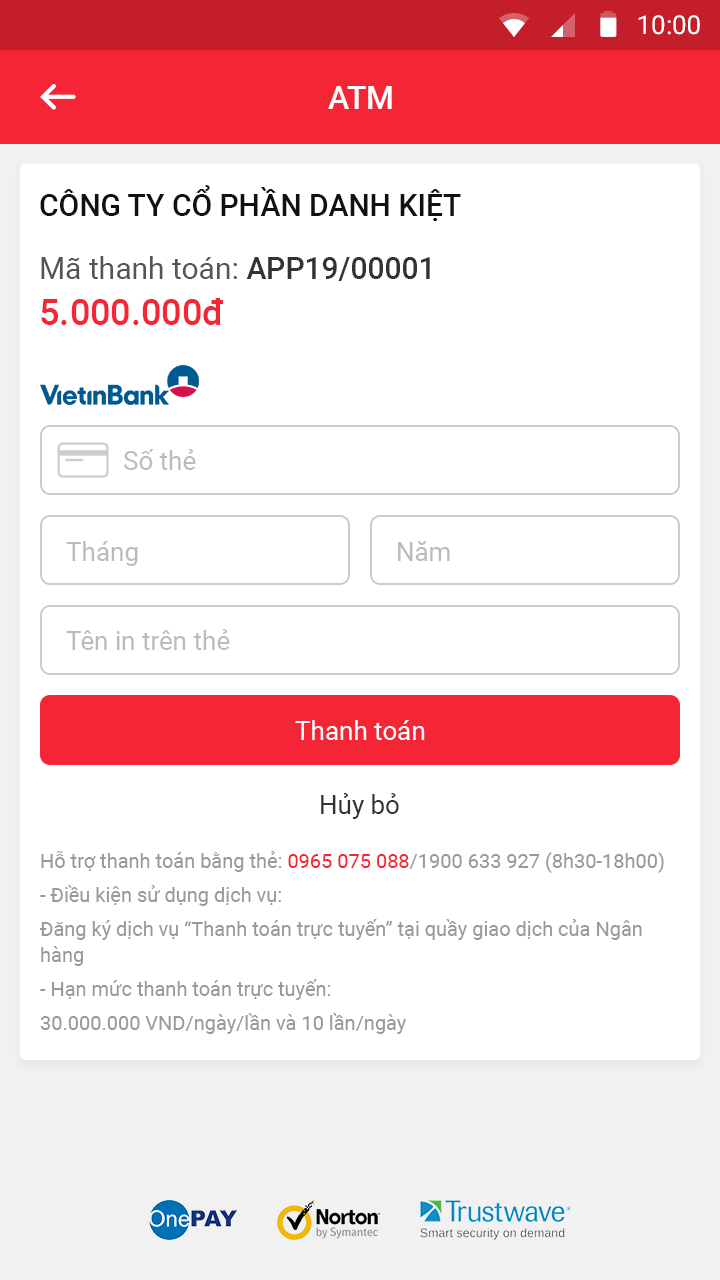
<style>
.page{position:relative;width:720px;height:1280px;background:#ffffff}
.page>*{position:absolute;margin:0}
.t1{font:26px "Roboto-Regular";color:#ffffff}
.t2{font:32px "Roboto-Medium";color:#ffffff}
.t3{font:30px "Roboto-Medium";color:#111111;text-transform:uppercase}
.t4{font:30px/46px "Roboto-Regular";color:#555555}
.t5{font:30px/46px "Roboto-Medium";color:#333333}
.t6{font:36px/46px "Roboto-Medium";color:#f42535}
.t7{font:26px "Roboto-Regular";color:#bbbbbb}
.t8{font:26px "Roboto-Regular";color:#333333}
.t9{font:20px/34px "Roboto-Regular";color:#999999}
.t10{font:20px/34px "Roboto-Regular";color:#f42535}
.t11{font:20px/26px "Roboto-Regular";color:#999999}
</style>
<div class="page">
<p class="t1" style="left:638px;top:15px;width:62px;height:20px">10:00</p>
<p class="t2" style="left:328px;top:86px;width:64px;height:23px">ATM</p>
<p class="t3" style="left:40px;top:185px;width:421px;height:36px">CÔNG TY CỔ PHẦN DANH KIỆT</p>
<p class="t4" style="left:41px;top:256px;width:389px;height:69px">Mã thanh toán: <span class="t5">APP19/00001<br></span><span class="t6">5.000.000đ</span></p>
<p class="t7" style="left:124px;top:449px;width:72px;height:21px">Số thẻ</p>
<p class="t7" style="left:66px;top:541px;width:72px;height:25px">Tháng</p>
<p class="t7" style="left:398px;top:541px;width:52px;height:20px">Năm</p>
<p class="t7" style="left:66px;top:629px;width:164px;height:21px">Tên in trên thẻ</p>
<p class="t1" style="left:295px;top:720px;width:130px;height:20px">Thanh toán</p>
<p class="t8" style="left:321px;top:793px;width:78px;height:26px">Hủy bỏ</p>
<p class="t9" style="left:39px;top:851px;width:625px;height:183px">Hỗ trợ thanh toán bằng thẻ: <span class="t10">0965 075 088</span>/1900 633 927 (8h30-18h00)<br>- Điều kiện sử dụng dịch vụ:<br>Đăng ký dịch vụ “Thanh toán trực tuyến” tại quầy giao dịch của Ngân <span class="t11">hàng<br></span>- Hạn mức thanh toán trực tuyến:<br>30.000.000 VND/ngày/lần và 10 lần/ngày</p>
</div>
